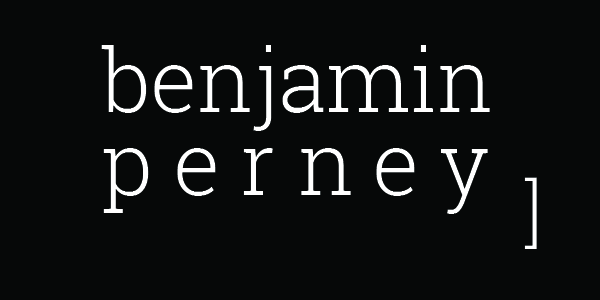
<style>
.page{position:relative;width:600px;height:300px;background:#060808}
.page>*{position:absolute;margin:0}
.t1{font:87.5px "RobotoSlab-Light";color:#ffffff}
.t2{font:87.5px "RobotoSlab-Light";letter-spacing:0.26em;color:#ffffff}
.t3{font:74.5px "RobotoSlab-Light";color:#ffffff}
</style>
<div class="page">
<p class="t1" style="left:101px;top:45px;width:389px;height:86px">benjamin</p>
<p class="t2" style="left:103px;top:148px;width:385px;height:66px">perney</p>
<p class="t3" style="left:524px;top:177px;width:13px;height:72px">]</p>
</div>
